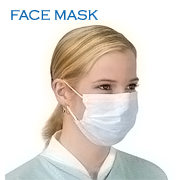
<style>
.page{position:relative;width:180px;height:180px;background:#ffffff}
.page>*{position:absolute;margin:0}
.t1{font:14px "CopperplateGothic-Light";color:#0a65b1}
</style>
<div class="page">
<p class="t1" style="left:11px;top:9px;width:87px;height:12px">FACE MASK</p>
</div>
